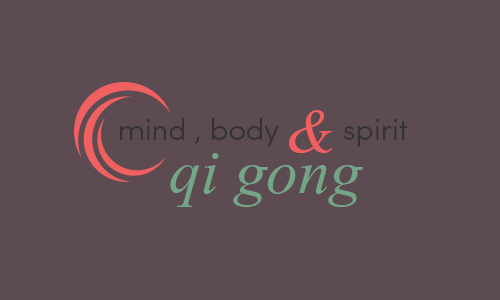
<style>
.page{position:relative;width:500px;height:300px;background:#5c4b51}
.page>*{position:absolute;margin:0}
.t1{font:82px "Kokila-Italic";color:#f06060}
.t2{font:30px "SofiaProLight";color:#333333}
.t3{font:82px "Kokila-Italic";color:#74a588}
</style>
<div class="page">
<p class="t1" style="left:289px;top:110px;width:44px;height:43px">&amp;</p>
<p class="t2" style="left:120px;top:118px;width:159px;height:29px">mind , body</p>
<p class="t2" style="left:344px;top:119px;width:64px;height:28px">spirit</p>
<p class="t3" style="left:170px;top:153px;width:193px;height:54px">qi gong</p>
</div>
